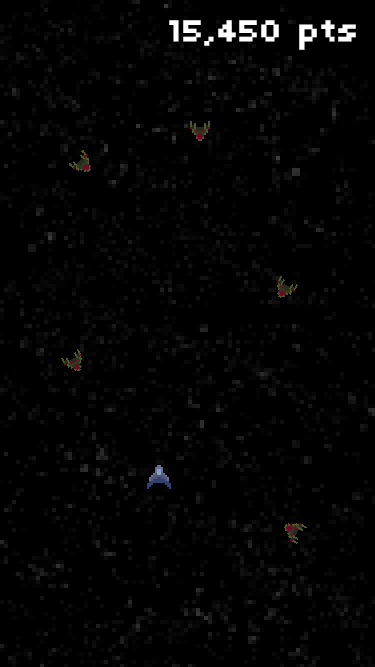
<style>
.page{position:relative;width:375px;height:667px;background:#000000}
.page>*{position:absolute;margin:0}
.t1{font:33px "04b03";color:#ffffff;font-weight:bold}
</style>
<div class="page">
<p class="t1" style="left:169px;top:20px;width:187px;height:30px">15,450 pts</p>
</div>
